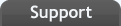
<style>
.page{position:relative;width:121px;height:26px}
.page>*{position:absolute;margin:0}
.t1{font:17px "TrebuchetMS-Bold";color:#f1f5f8}
</style>
<div class="page">
<p class="t1" style="left:30px;top:5px;width:62px;height:17px">Support</p>
</div>
